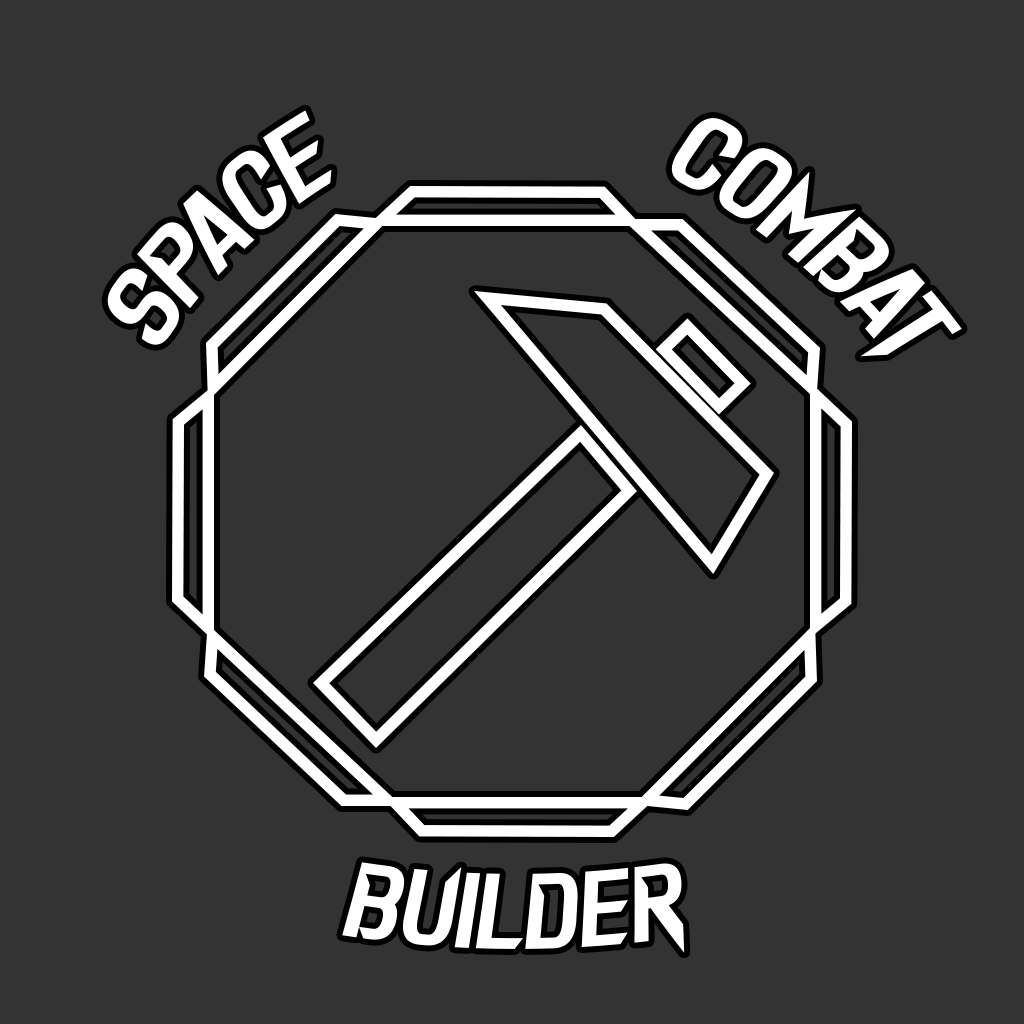
<style>
.page{position:relative;width:1024px;height:1024px;background:#333333}
.page>*{position:absolute;margin:0}
.t1{font:110px "DarkSeed";color:#ffffff}
</style>
<div class="page">
<p class="t1" style="left:107px;top:110px;width:225px;height:235px;rotate:-44deg">space</p>
<p class="t1" style="left:671px;top:118px;width:291px;height:239px;rotate:40deg">Combat</p>
<p class="t1" style="left:342px;top:862px;width:343px;height:91px">Builder</p>
</div>
